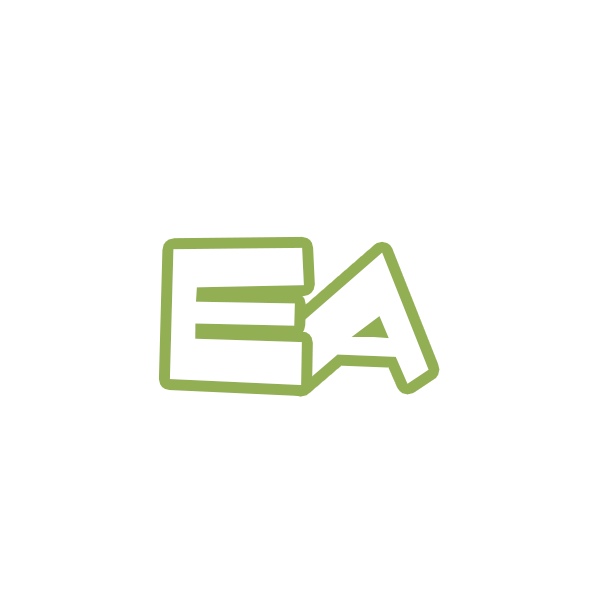
<style>
.page{position:relative;width:600px;height:600px;background:#ffffff}
.page>*{position:absolute;margin:0}
.t1{font:145.8px "Quake-&-Shake";color:#ffffff}
</style>
<div class="page">
<p class="t1" style="left:169px;top:247px;width:135px;height:138px">e</p>
<p class="t1" style="left:274px;top:252px;width:155px;height:134px">a</p>
</div>
